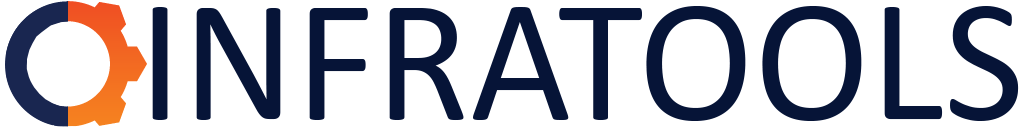
<style>
.page{position:relative;width:1020px;height:127px;background:#ffffff}
.page>*{position:absolute;margin:0}
.t1{font:175px "Calibri";color:#061437}
</style>
<div class="page">
<p class="t1" style="left:152px;top:6px;width:867px;height:115px">INFRATOOLS</p>
</div>
